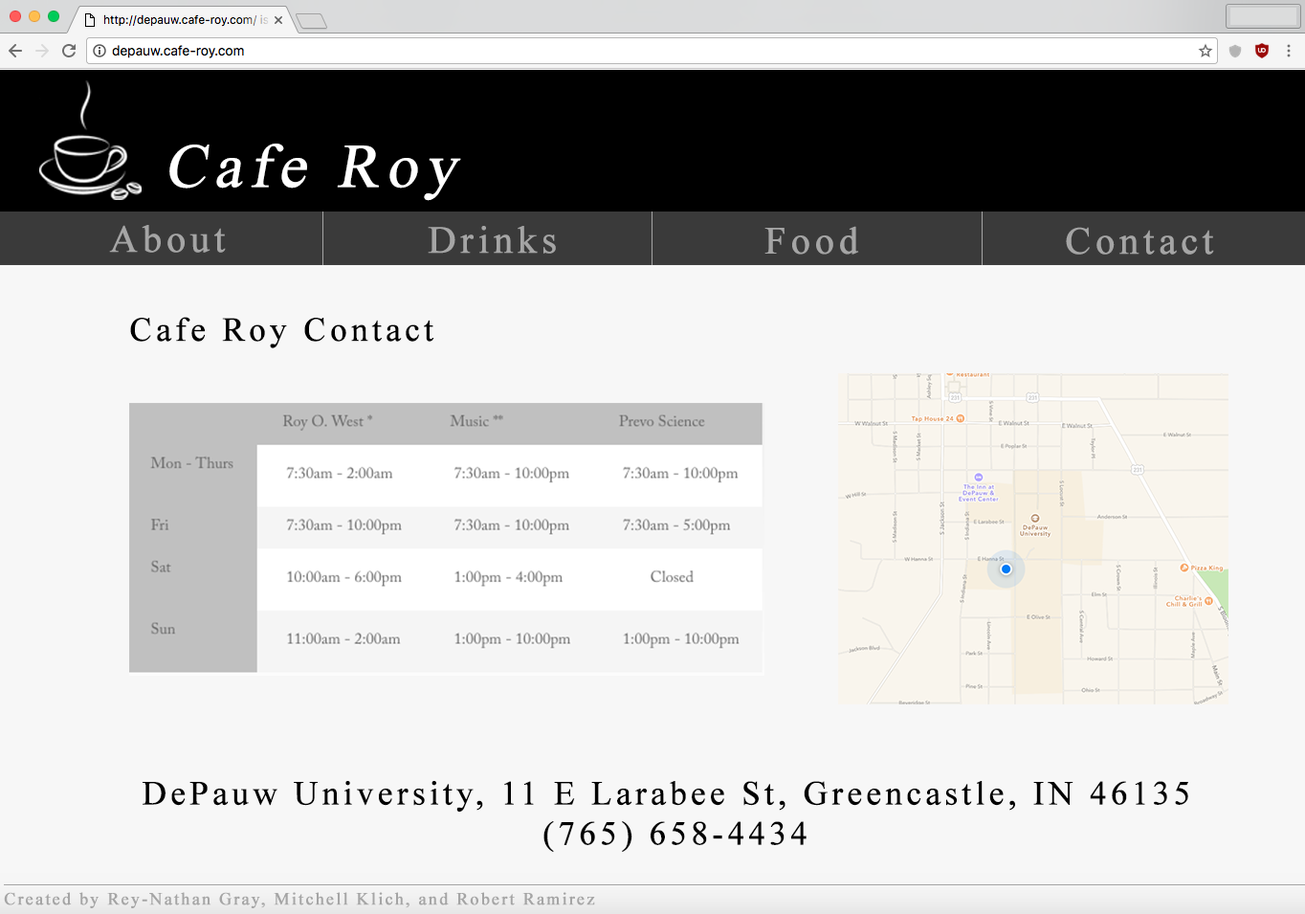
<style>
.page{position:relative;width:1305px;height:914px;background:#f7f7f7}
.page>*{position:absolute;margin:0}
.t1{font:61.7px "TimesNewRomanPSMT";letter-spacing:0.1em;color:#ffffff;font-weight:bold;font-style:italic}
.t2{font:38.3px "TimesNewRomanPSMT";letter-spacing:0.1em;color:#a5a5a5;font-weight:bold}
.t3{font:33.5px "TimesNewRomanPSMT";letter-spacing:0.1em;color:#000000;font-weight:bold}
.t4{font:17.2px "TimesNewRomanPSMT";letter-spacing:0.1em;color:#a5a5a5;font-weight:bold}
</style>
<div class="page">
<p class="t1" style="left:169px;top:144px;width:292px;height:57px">Cafe Roy</p>
<p class="t2" style="left:109px;top:225px;width:117px;height:28px">About</p>
<p class="t2" style="left:428px;top:226px;width:128px;height:28px">Drinks</p>
<p class="t2" style="left:764px;top:226px;width:95px;height:29px">Food</p>
<p class="t2" style="left:1066px;top:227px;width:148px;height:28px">Contact</p>
<p class="t3" style="left:130px;top:317px;width:304px;height:31px">Cafe Roy Contact</p>
<p class="t3" style="left:143px;top:781px;width:1045px;height:71px">DePauw University, 11 E Larabee St, Greencastle, IN 46135<br>             (765) 658-4434</p>
<p class="t4" style="left:4px;top:892px;width:591px;height:16px">Created by Rey-Nathan Gray, Mitchell Klich, and Robert Ramirez</p>
</div>
